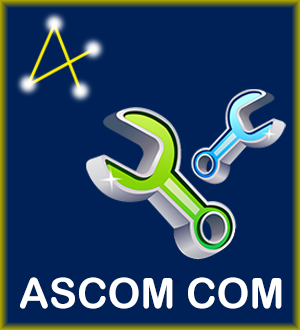
<style>
.page{position:relative;width:300px;height:330px;background:#002157}
.page>*{position:absolute;margin:0}
.t1{font:41.7px "ArialRoundedMTBold";color:#ffffff}
</style>
<div class="page">
<p class="t1" style="left:20px;top:277px;width:262px;height:32px">ASCOM COM</p>
</div>
